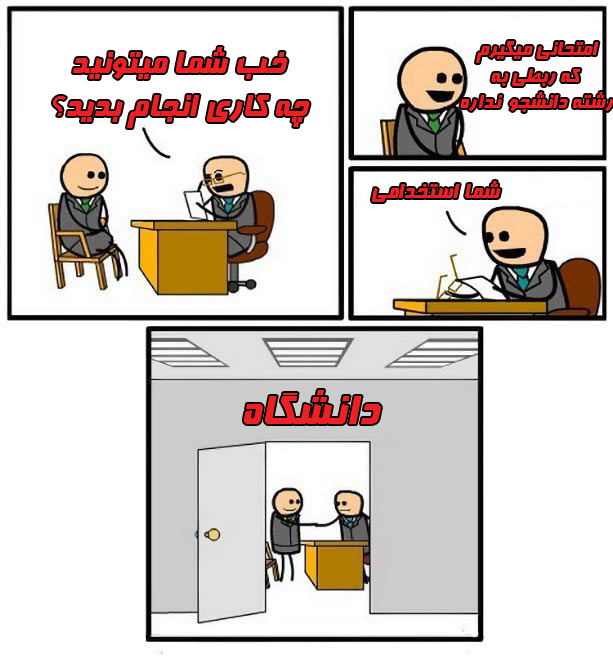
<style>
.page{position:relative;width:613px;height:660px;background:#ffffff}
.page>*{position:absolute;margin:0}
.t1{font:22px "Far.Farnaz";color:#ed2024}
.t2{font:36px "Far.Farnaz";color:#ed2024}
.t3{font:24px "Far.Farnaz";color:#ed2024}
.t4{font:48px "Far.Farnaz";color:#ed2024}
</style>
<div class="page">
<p class="t1" style="left:460px;top:41px;width:154px;height:71px;text-align:center">امتحانی میگیرم<br> که ربطی به <br>رشته دانشجو  نداره</p>
<p class="t2" style="left:53px;top:47px;width:257px;height:81px;text-align:center">خب شما میتونید <br>چه کاری انجام بدید؟</p>
<p class="t3" style="left:372px;top:181px;width:129px;height:21px">شما استخدامی</p>
<p class="t4" style="left:244px;top:390px;width:137px;height:34px">دانشگاه</p>
</div>
